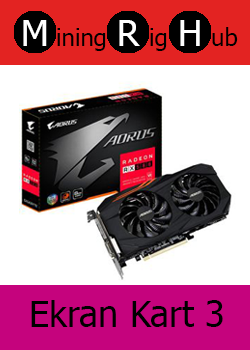
<style>
.page{position:relative;width:250px;height:350px;background:#ffffff}
.page>*{position:absolute;margin:0}
.t1{font:36px "Tahoma";color:#ffffff}
.t2{font:24px "Tahoma";color:#000000}
.t3{font:36px "Tahoma";color:#000000}
</style>
<div class="page">
<p class="t1" style="left:23px;top:20px;width:24px;height:26px">M</p>
<p class="t2" style="left:57px;top:28px;width:49px;height:23px">ining</p>
<p class="t1" style="left:119px;top:20px;width:21px;height:26px">R</p>
<p class="t2" style="left:150px;top:28px;width:17px;height:23px">ig</p>
<p class="t1" style="left:180px;top:20px;width:20px;height:26px">H</p>
<p class="t2" style="left:212px;top:27px;width:26px;height:19px">ub</p>
<p class="t3" style="left:31px;top:300px;width:192px;height:27px">Ekran Kart 3</p>
</div>
